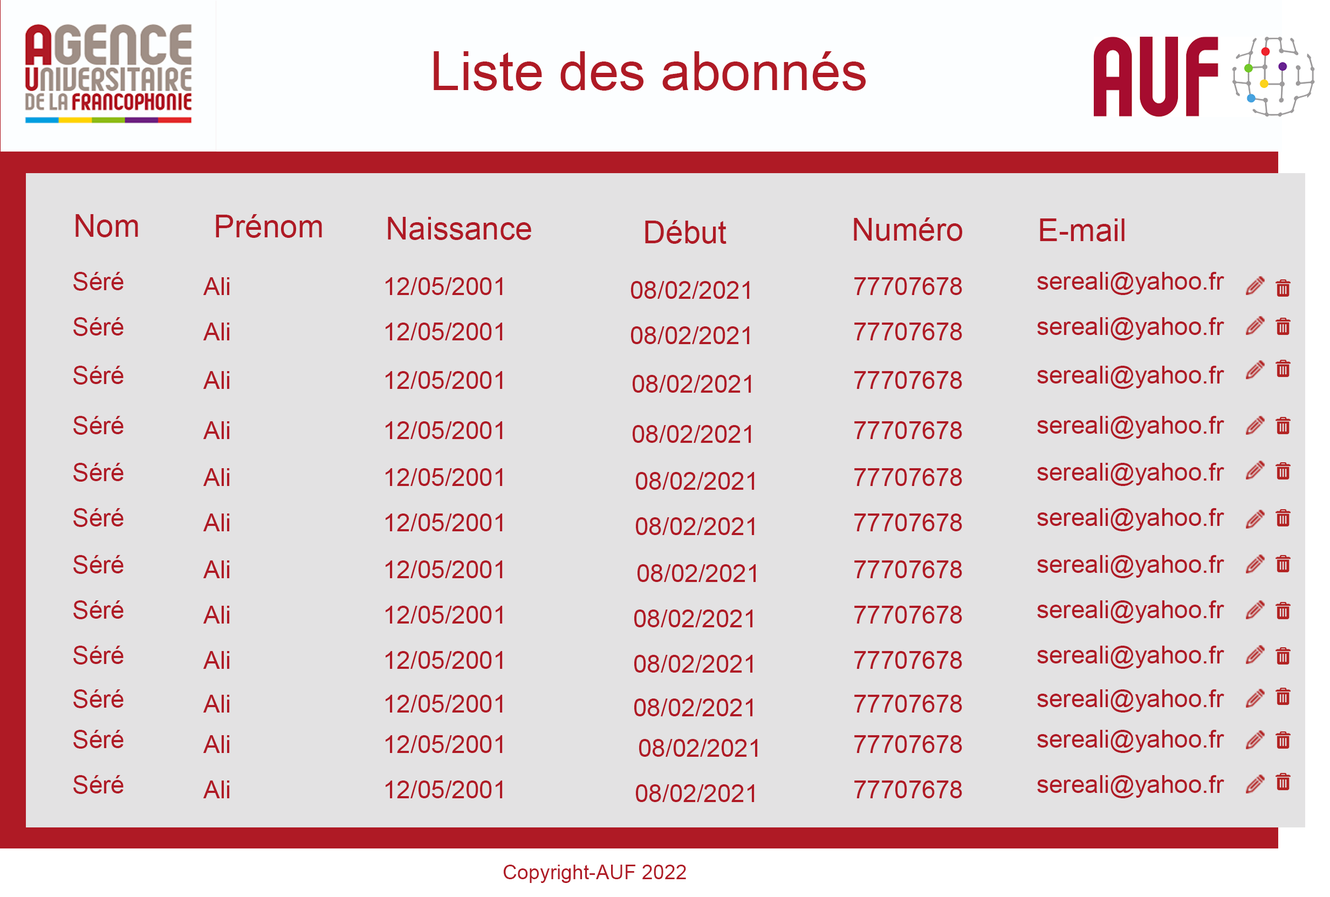
<style>
.page{position:relative;width:1330px;height:897px;background:#e3e2e3}
.page>*{position:absolute;margin:0}
.t1{font:53.9px "ArialMT";color:#af1a25}
.t2{font:31.5px "ArialMT";color:#af1a25}
.t3{font:24.7px "ArialMT";color:#af1a25}
.t4{font:20.2px "ArialMT";color:#af1a25}
</style>
<div class="page">
<p class="t1" style="left:434px;top:51px;width:432px;height:40px">Liste des abonnés</p>
<p class="t2" style="left:75px;top:214px;width:63px;height:23px">Nom</p>
<p class="t2" style="left:216px;top:214px;width:106px;height:24px">Prénom</p>
<p class="t2" style="left:388px;top:217px;width:143px;height:23px">Naissance</p>
<p class="t2" style="left:645px;top:220px;width:81px;height:24px">Début</p>
<p class="t2" style="left:854px;top:217px;width:109px;height:24px">Numéro</p>
<p class="t2" style="left:1040px;top:218px;width:84px;height:24px">E-mail</p>
<p class="t3" style="left:73px;top:272px;width:50px;height:19px">Séré</p>
<p class="t3" style="left:203px;top:277px;width:27px;height:18px">Ali</p>
<p class="t3" style="left:386px;top:277px;width:117px;height:18px">12/05/2001</p>
<p class="t3" style="left:631px;top:281px;width:119px;height:18px">08/02/2021</p>
<p class="t3" style="left:854px;top:277px;width:108px;height:18px">77707678</p>
<p class="t3" style="left:1037px;top:272px;width:187px;height:23px">sereali@yahoo.fr</p>
<p class="t3" style="left:73px;top:317px;width:50px;height:19px">Séré</p>
<p class="t3" style="left:1037px;top:317px;width:187px;height:23px">sereali@yahoo.fr</p>
<p class="t3" style="left:203px;top:322px;width:27px;height:18px">Ali</p>
<p class="t3" style="left:386px;top:322px;width:117px;height:18px">12/05/2001</p>
<p class="t3" style="left:631px;top:326px;width:119px;height:18px">08/02/2021</p>
<p class="t3" style="left:854px;top:322px;width:108px;height:18px">77707678</p>
<p class="t3" style="left:73px;top:366px;width:50px;height:18px">Séré</p>
<p class="t3" style="left:1037px;top:366px;width:187px;height:23px">sereali@yahoo.fr</p>
<p class="t3" style="left:203px;top:371px;width:27px;height:18px">Ali</p>
<p class="t3" style="left:386px;top:371px;width:117px;height:18px">12/05/2001</p>
<p class="t3" style="left:633px;top:375px;width:118px;height:18px">08/02/2021</p>
<p class="t3" style="left:854px;top:371px;width:108px;height:18px">77707678</p>
<p class="t3" style="left:73px;top:416px;width:50px;height:19px">Séré</p>
<p class="t3" style="left:203px;top:421px;width:27px;height:18px">Ali</p>
<p class="t3" style="left:386px;top:421px;width:117px;height:18px">12/05/2001</p>
<p class="t3" style="left:633px;top:425px;width:118px;height:18px">08/02/2021</p>
<p class="t3" style="left:854px;top:421px;width:108px;height:18px">77707678</p>
<p class="t3" style="left:1037px;top:416px;width:187px;height:23px">sereali@yahoo.fr</p>
<p class="t3" style="left:73px;top:463px;width:50px;height:19px">Séré</p>
<p class="t3" style="left:203px;top:468px;width:27px;height:18px">Ali</p>
<p class="t3" style="left:386px;top:468px;width:117px;height:18px">12/05/2001</p>
<p class="t3" style="left:636px;top:472px;width:118px;height:18px">08/02/2021</p>
<p class="t3" style="left:854px;top:468px;width:108px;height:18px">77707678</p>
<p class="t3" style="left:1037px;top:463px;width:187px;height:23px">sereali@yahoo.fr</p>
<p class="t3" style="left:73px;top:508px;width:50px;height:19px">Séré</p>
<p class="t3" style="left:1037px;top:508px;width:187px;height:23px">sereali@yahoo.fr</p>
<p class="t3" style="left:203px;top:513px;width:27px;height:18px">Ali</p>
<p class="t3" style="left:386px;top:513px;width:117px;height:18px">12/05/2001</p>
<p class="t3" style="left:636px;top:517px;width:118px;height:18px">08/02/2021</p>
<p class="t3" style="left:854px;top:513px;width:108px;height:18px">77707678</p>
<p class="t3" style="left:73px;top:555px;width:50px;height:19px">Séré</p>
<p class="t3" style="left:1037px;top:555px;width:187px;height:23px">sereali@yahoo.fr</p>
<p class="t3" style="left:203px;top:560px;width:27px;height:18px">Ali</p>
<p class="t3" style="left:386px;top:560px;width:117px;height:18px">12/05/2001</p>
<p class="t3" style="left:637px;top:564px;width:119px;height:18px">08/02/2021</p>
<p class="t3" style="left:854px;top:560px;width:108px;height:18px">77707678</p>
<p class="t3" style="left:73px;top:600px;width:50px;height:19px">Séré</p>
<p class="t3" style="left:203px;top:606px;width:27px;height:17px">Ali</p>
<p class="t3" style="left:386px;top:606px;width:117px;height:17px">12/05/2001</p>
<p class="t3" style="left:854px;top:606px;width:108px;height:17px">77707678</p>
<p class="t3" style="left:1037px;top:600px;width:187px;height:23px">sereali@yahoo.fr</p>
<p class="t3" style="left:634px;top:609px;width:119px;height:18px">08/02/2021</p>
<p class="t3" style="left:73px;top:645px;width:50px;height:19px">Séré</p>
<p class="t3" style="left:203px;top:651px;width:27px;height:18px">Ali</p>
<p class="t3" style="left:386px;top:651px;width:117px;height:18px">12/05/2001</p>
<p class="t3" style="left:854px;top:651px;width:108px;height:18px">77707678</p>
<p class="t3" style="left:1037px;top:645px;width:187px;height:24px">sereali@yahoo.fr</p>
<p class="t3" style="left:634px;top:655px;width:119px;height:17px">08/02/2021</p>
<p class="t3" style="left:73px;top:689px;width:50px;height:19px">Séré</p>
<p class="t3" style="left:1037px;top:689px;width:187px;height:23px">sereali@yahoo.fr</p>
<p class="t3" style="left:203px;top:695px;width:27px;height:17px">Ali</p>
<p class="t3" style="left:386px;top:695px;width:117px;height:17px">12/05/2001</p>
<p class="t3" style="left:634px;top:698px;width:119px;height:18px">08/02/2021</p>
<p class="t3" style="left:854px;top:695px;width:108px;height:17px">77707678</p>
<p class="t3" style="left:73px;top:730px;width:50px;height:18px">Séré</p>
<p class="t3" style="left:203px;top:735px;width:27px;height:18px">Ali</p>
<p class="t3" style="left:386px;top:735px;width:117px;height:18px">12/05/2001</p>
<p class="t3" style="left:854px;top:735px;width:108px;height:18px">77707678</p>
<p class="t3" style="left:1037px;top:730px;width:187px;height:23px">sereali@yahoo.fr</p>
<p class="t3" style="left:639px;top:739px;width:119px;height:18px">08/02/2021</p>
<p class="t3" style="left:73px;top:775px;width:50px;height:19px">Séré</p>
<p class="t3" style="left:203px;top:780px;width:27px;height:18px">Ali</p>
<p class="t3" style="left:386px;top:780px;width:117px;height:18px">12/05/2001</p>
<p class="t3" style="left:636px;top:784px;width:118px;height:18px">08/02/2021</p>
<p class="t3" style="left:854px;top:780px;width:108px;height:18px">77707678</p>
<p class="t3" style="left:1037px;top:775px;width:187px;height:23px">sereali@yahoo.fr</p>
<p class="t4" style="left:503px;top:864px;width:183px;height:19px">Copyright-AUF 2022</p>
</div>
